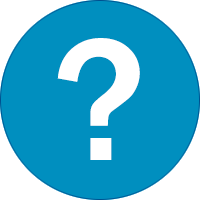
<style>
.page{position:relative;width:200px;height:200px;background:#008fbf}
.page>*{position:absolute;margin:0}
.t1{font:180px "FranklinGothic-Medium";color:#ffffff}
</style>
<div class="page">
<p class="t1" style="left:57px;top:38px;width:83px;height:122px">?</p>
</div>
